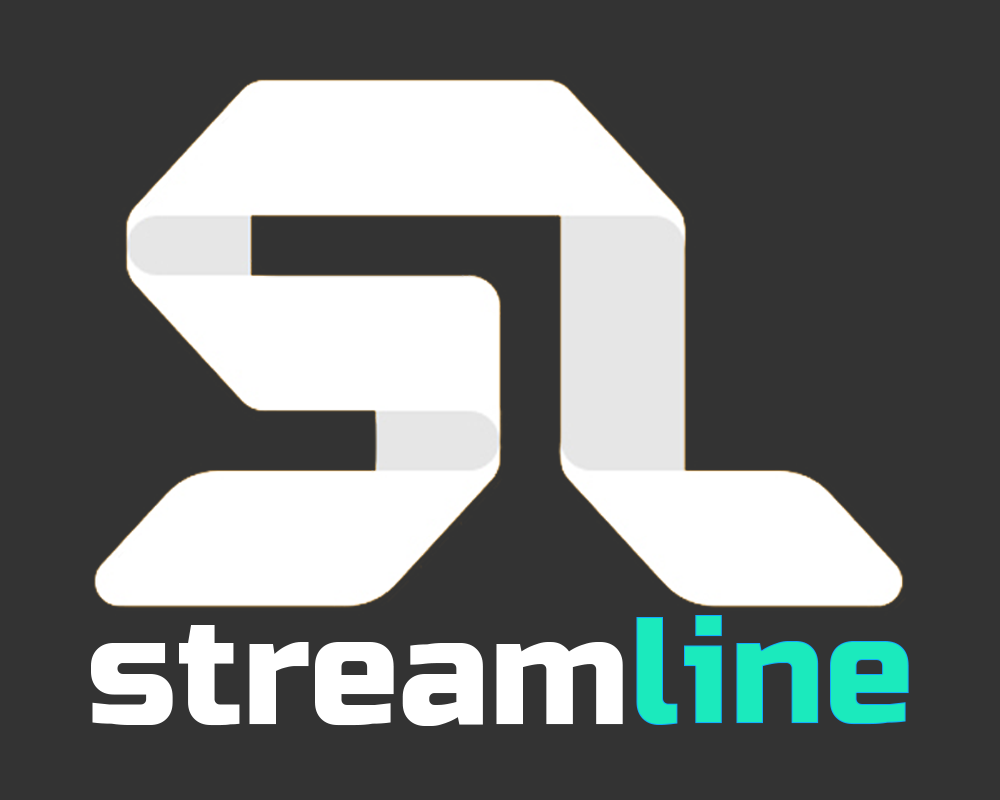
<style>
.page{position:relative;width:1000px;height:800px;background:#333333}
.page>*{position:absolute;margin:0}
.t1{font:151.2px "RussoOne";color:#1beabd}
.t2{font:151.2px "RussoOne";color:#ffffff}
</style>
<div class="page">
<p class="t1" style="left:636px;top:615px;width:273px;height:110px">line</p>
<p class="t2" style="left:91px;top:625px;width:532px;height:101px">stream</p>
</div>
